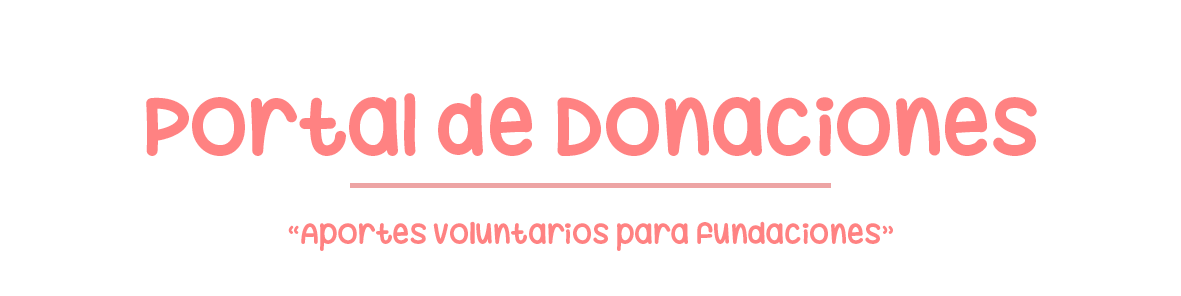
<style>
.page{position:relative;width:1181px;height:296px;background:#ffffff}
.page>*{position:absolute;margin:0}
.t1{font:83.7px "HugMeTight";color:#ff8282}
.t2{font:29.5px "HugMeTight";color:#ff8282}
</style>
<div class="page">
<p class="t1" style="left:146px;top:93px;width:891px;height:63px">Portal de Donaciones</p>
<p class="t2" style="left:288px;top:221px;width:605px;height:30px">“Aportes voluntarios para fundaciones”</p>
</div>
